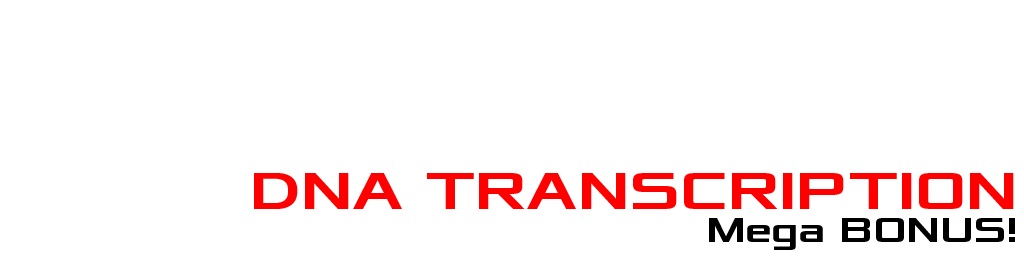
<style>
.page{position:relative;width:1024px;height:256px;background:#ffffff}
.page>*{position:absolute;margin:0}
.t1{font:55px "Xolonium-Bold";color:#ff0000}
.t2{font:36px "Xolonium-Bold";color:#000000}
</style>
<div class="page">
<p class="t1" style="left:254px;top:173px;width:760px;height:36px">DNA TRANSCRIPTION</p>
<p class="t2" style="left:709px;top:218px;width:306px;height:32px">Mega BONUS!</p>
</div>
